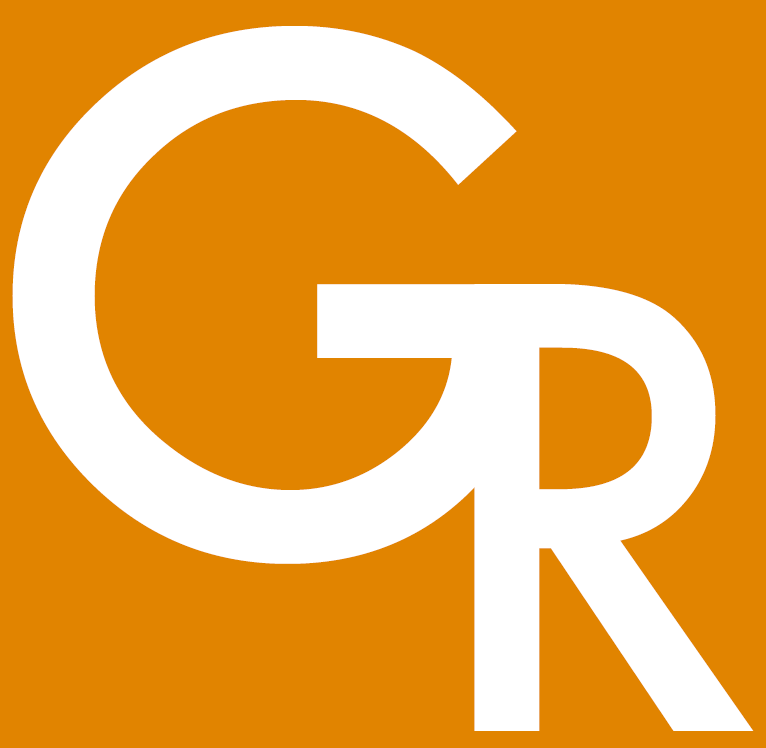
<style>
.page{position:relative;width:766px;height:748px;background:#e18400}
.page>*{position:absolute;margin:0}
.t1{font:687.1px "Futura-Medium";color:#ffffff;scale:1.04 1}
.t2{font:592.9px "Futura-Medium";color:#ffffff;scale:0.96 1}
</style>
<div class="page">
<p class="t1" style="left:12px;top:26px;width:529px;height:538px">G</p>
<p class="t2" style="left:474px;top:284px;width:280px;height:447px">R</p>
</div>
